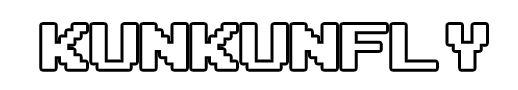
<style>
.page{position:relative;width:518px;height:90px;background:#ffffff}
.page>*{position:absolute;margin:0}
.t1{font:50px "Emulogic";color:#ffffff}
</style>
<div class="page">
<p class="t1" style="left:42px;top:25px;width:444px;height:44px">Kunkunfly</p>
</div>
